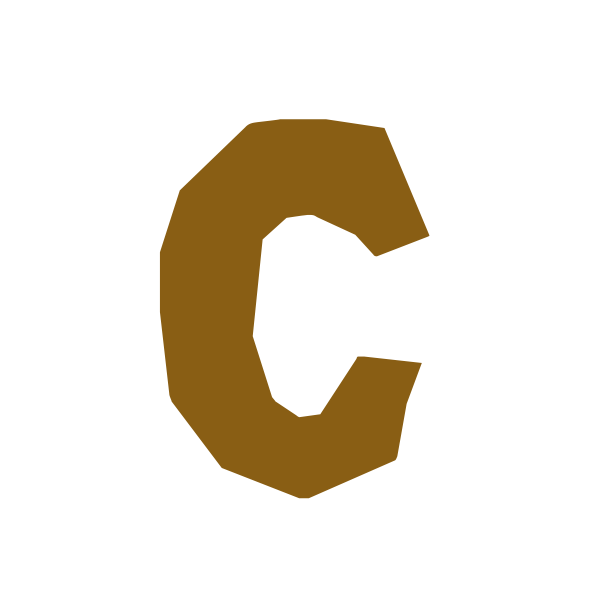
<style>
.page{position:relative;width:612px;height:612px;background:#ffffff}
.page>*{position:absolute;margin:0}
.t1{font:583px "DKSnippitySnap";letter-spacing:0.04em;color:#895e14}
</style>
<div class="page">
<p class="t1" style="left:159px;top:119px;width:271px;height:380px">C</p>
</div>
